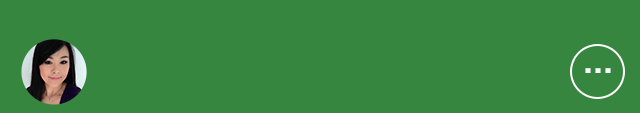
<style>
.page{position:relative;width:640px;height:113px;background:#378640}
.page>*{position:absolute;margin:0}
.t1{font:35.6px "HelveticaNeue-Medium";letter-spacing:0.01em;color:#ffffff}
</style>
<div class="page">
<p class="t1" style="left:585px;top:68px;width:26px;height:5px">...</p>
</div>
